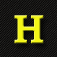
<style>
.page{position:relative;width:57px;height:57px}
.page>*{position:absolute;margin:0}
.t1{font:38.3px "AdelleBasic-Bold";letter-spacing:0.02em;color:#f3f617}
</style>
<div class="page">
<p class="t1" style="left:14px;top:15px;width:30px;height:29px">H</p>
</div>
